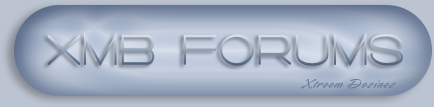
<style>
.page{position:relative;width:434px;height:107px}
.page>*{position:absolute;margin:0}
.t1{font:45.6px "Salaryman";letter-spacing:0.05em;scale:0.83 1}
</style>
<div class="page">
<p class="t1" style="left:47px;top:32px;width:356px;height:34px">XMB  Forums</p>
</div>
